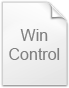
<style>
.page{position:relative;width:69px;height:88px}
.page>*{position:absolute;margin:0}
.t1{font:16px "ArialMT";color:#808080}
</style>
<div class="page">
<p class="t1" style="left:9px;top:29px;width:51px;height:31px;text-align:center">Win<br>Control</p>
</div>
